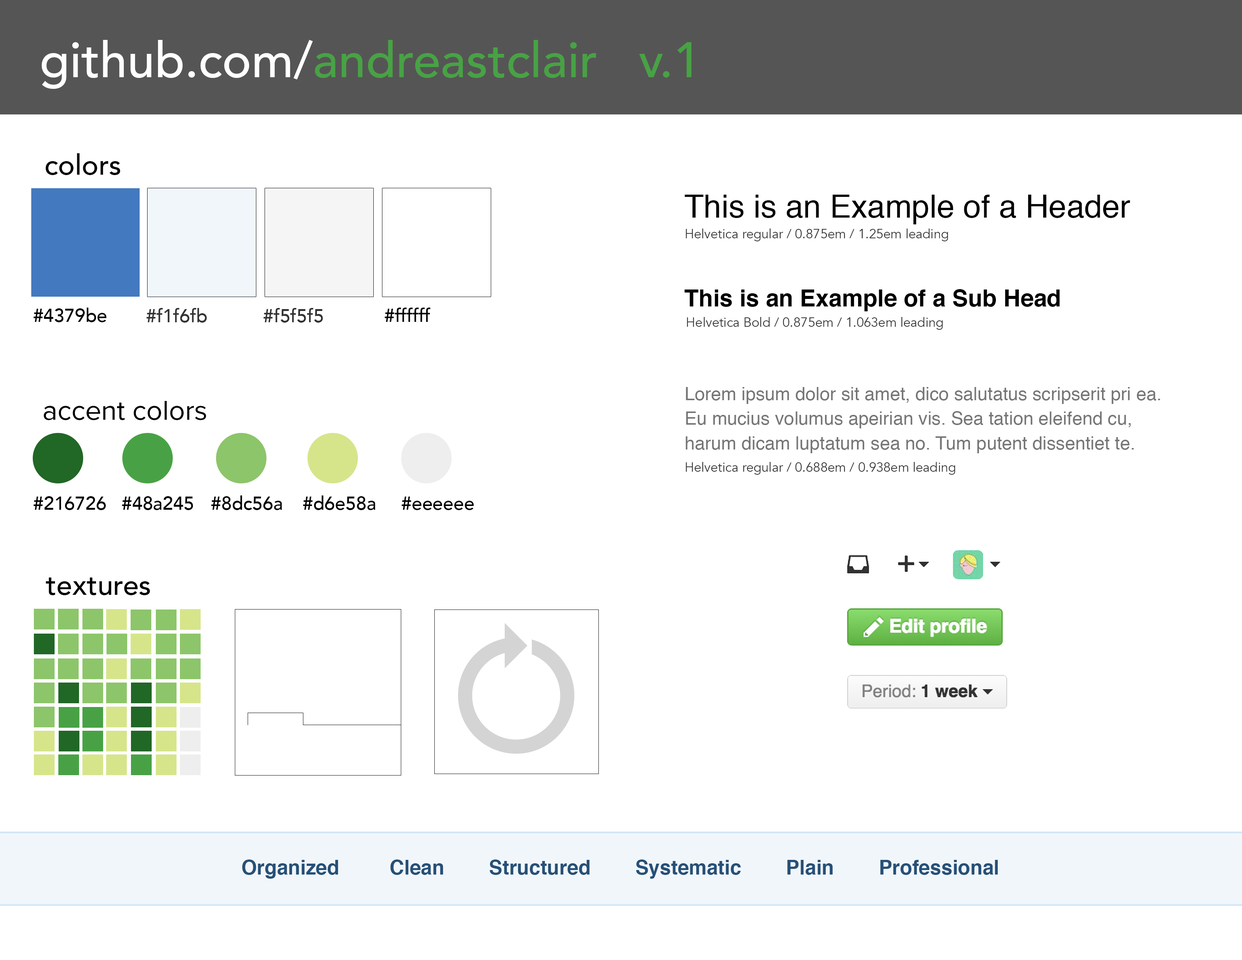
<style>
.page{position:relative;width:1242px;height:960px;background:#ffffff}
.page>*{position:absolute;margin:0}
.t1{font:49.3px "Avenir-Medium";color:#48a245}
.t2{font:49.3px "Avenir-Medium";color:#ffffff}
.t3{font:28.2px "Avenir-Medium";color:#030000}
.t4{font:32px "Helvetica";color:#020202}
.t5{font:13px "Avenir-Book";color:#333333}
.t6{font:23.6px "Helvetica-Bold";color:#010101}
.t7{font:18.8px "Avenir-Medium";color:#030000}
.t8{font:18.8px "Avenir-Medium";color:#333333}
.t9{font:18.8px "Avenir-Medium";color:#313131}
.t10{font:18.8px "Avenir-Medium";color:#000102}
.t11{font:18.3px/24.5px "Helvetica";color:#767676}
.t12{font:28.2px "ProximaNova-Regular";color:#030000}
.t13{font:18.8px "Avenir-Medium";color:#010101}
.t14{font:20.1px "Helvetica-Bold";color:#265077}
.t15{font:20.1px "Helvetica-Bold";color:#265077;text-transform:uppercase}
</style>
<div class="page">
<p class="t1" style="left:41px;top:40px;width:651px;height:49px"><span class="t2">github.com/</span>andreastclair   v.1</p>
<p class="t3" style="left:46px;top:153px;width:74px;height:22px">colors</p>
<p class="t4" style="left:685px;top:195px;width:445px;height:29px">This is an Example of a Header</p>
<p class="t5" style="left:686px;top:228px;width:262px;height:13px">Helvetica regular / 0.875em / 1.25em leading</p>
<p class="t6" style="left:685px;top:289px;width:375px;height:22px">This is an Example of a Sub Head</p>
<p class="t7" style="left:34px;top:308px;width:73px;height:14px">#4379be</p>
<p class="t8" style="left:146px;top:308px;width:61px;height:15px">#f1f6fb</p>
<p class="t9" style="left:264px;top:308px;width:59px;height:15px">#f5f5f5</p>
<p class="t10" style="left:385px;top:308px;width:46px;height:14px">#ffffff</p>
<p class="t5" style="left:687px;top:317px;width:256px;height:13px">Helvetica Bold / 0.875em / 1.063em leading</p>
<p class="t11" style="left:686px;top:387px;width:475px;height:66px">Lorem ipsum dolor sit amet, dico salutatus scripserit pri ea. Eu mucius volumus apeirian vis. Sea tation eleifend cu, harum dicam luptatum sea no. Tum putent dissentiet te.</p>
<p class="t12" style="left:44px;top:401px;width:162px;height:19px">accent colors</p>
<p class="t5" style="left:686px;top:462px;width:269px;height:13px">Helvetica regular / 0.688em / 0.938em leading</p>
<p class="t10" style="left:34px;top:496px;width:72px;height:14px">#216726</p>
<p class="t10" style="left:122px;top:496px;width:71px;height:14px">#48a245</p>
<p class="t13" style="left:211px;top:495px;width:71px;height:15px">#8dc56a</p>
<p class="t10" style="left:303px;top:495px;width:72px;height:15px">#d6e58a</p>
<p class="t13" style="left:402px;top:497px;width:72px;height:13px">#eeeeee</p>
<p class="t3" style="left:46px;top:577px;width:104px;height:18px">textures</p>
<p class="t14" style="left:242px;top:859px;width:756px;height:20px"><span class="t15">O</span>rganized         Clean        Structured        Systematic        Plain        Professional</p>
</div>
